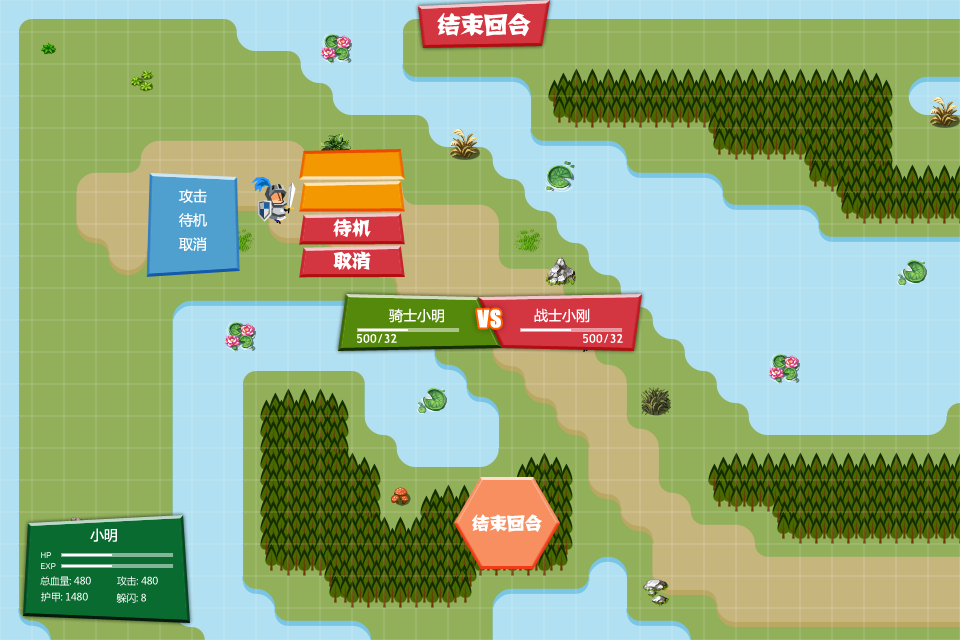
<style>
.page{position:relative;width:960px;height:640px;background:#92b05a}
.page>*{position:absolute;margin:0}
.t1{font:24px "FZJZJW--GB1-0";letter-spacing:-0.025em;color:#ffffff}
.t2{font:14px/24px "MicrosoftYaHei";color:#ffffff}
.t3{font:19.2px "FZJZJW--GB1-0";letter-spacing:-0.025em;color:#ffffff}
.t4{font:14px "MicrosoftYaHei";color:#ffffff}
.t5{font:22px "Impact";letter-spacing:0.05em;color:#fffffe}
.t6{font:12px "TrebuchetMS";letter-spacing:0.05em;color:#fffffe}
.t7{font:18px "FZJZJW--GB1-0";letter-spacing:-0.025em;color:#ffffff}
.t8{font:14px "MicrosoftYaHei";letter-spacing:-0.025em;color:#ffffff}
.t9{font:8px "ArialMT";letter-spacing:-0.025em}
.t10{font:10px "MicrosoftYaHei";letter-spacing:-0.025em;color:#ffffff}
</style>
<div class="page">
<p class="t1" style="left:437px;top:13px;width:94px;height:24px">结束回合</p>
<p class="t2" style="left:179px;top:189px;width:28px;height:62px;text-align:center">攻击<br>待机<br>取消</p>
<p class="t3" style="left:333px;top:218px;width:38px;height:20px">待机</p>
<p class="t3" style="left:333px;top:251px;width:38px;height:19px">取消</p>
<p class="t4" style="left:389px;top:308px;width:55px;height:15px">骑士小明</p>
<p class="t5" style="left:477px;top:309px;width:24px;height:19px">VS</p>
<p class="t4" style="left:534px;top:308px;width:56px;height:15px">战士小刚</p>
<p class="t6" style="left:357px;top:334px;width:40px;height:9px">500/32</p>
<p class="t6" style="left:583px;top:334px;width:40px;height:9px">500/32</p>
<p class="t7" style="left:472px;top:514px;width:70px;height:18px">结束回合</p>
<p class="t8" style="left:90px;top:528px;width:27px;height:14px">小明</p>
<p class="t9" style="left:41px;top:552px;width:10px;height:6px">HP</p>
<p class="t9" style="left:41px;top:563px;width:15px;height:6px">EXP</p>
<p class="t10" style="left:40px;top:576px;width:51px;height:10px">总血量: 480</p>
<p class="t10" style="left:117px;top:576px;width:41px;height:10px">攻击: 480</p>
<p class="t10" style="left:41px;top:592px;width:47px;height:10px">护甲: 1480</p>
<p class="t10" style="left:116px;top:593px;width:30px;height:10px">躲闪: 8</p>
</div>
